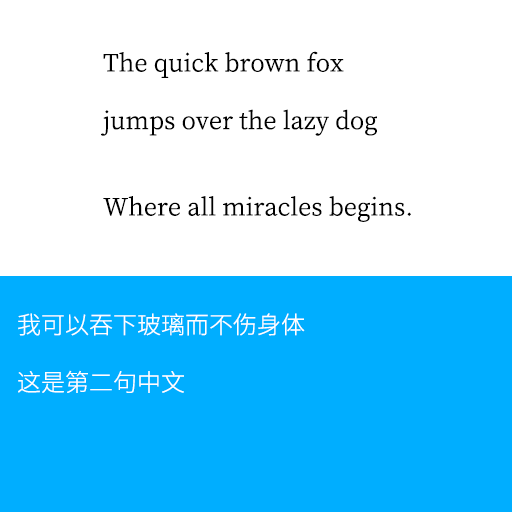
<style>
.page{position:relative;width:512px;height:512px;background:#ffffff}
.page>*{position:absolute;margin:0}
.t1{font:24px "SourceHanSerifSC-Regular";color:#000000}
.t2{font:24px "SourceHanSans-Light";color:#ffffff}
</style>
<div class="page">
<p class="t1" style="left:101px;top:51px;width:310px;height:171px">The quick brown fox <br><br>jumps over the lazy dog<br><br><br>Where all miracles begins.</p>
<p class="t2" style="left:18px;top:313px;width:287px;height:80px">我可以吞下玻璃而不伤身体<br><br>这是第二句中文</p>
</div>
